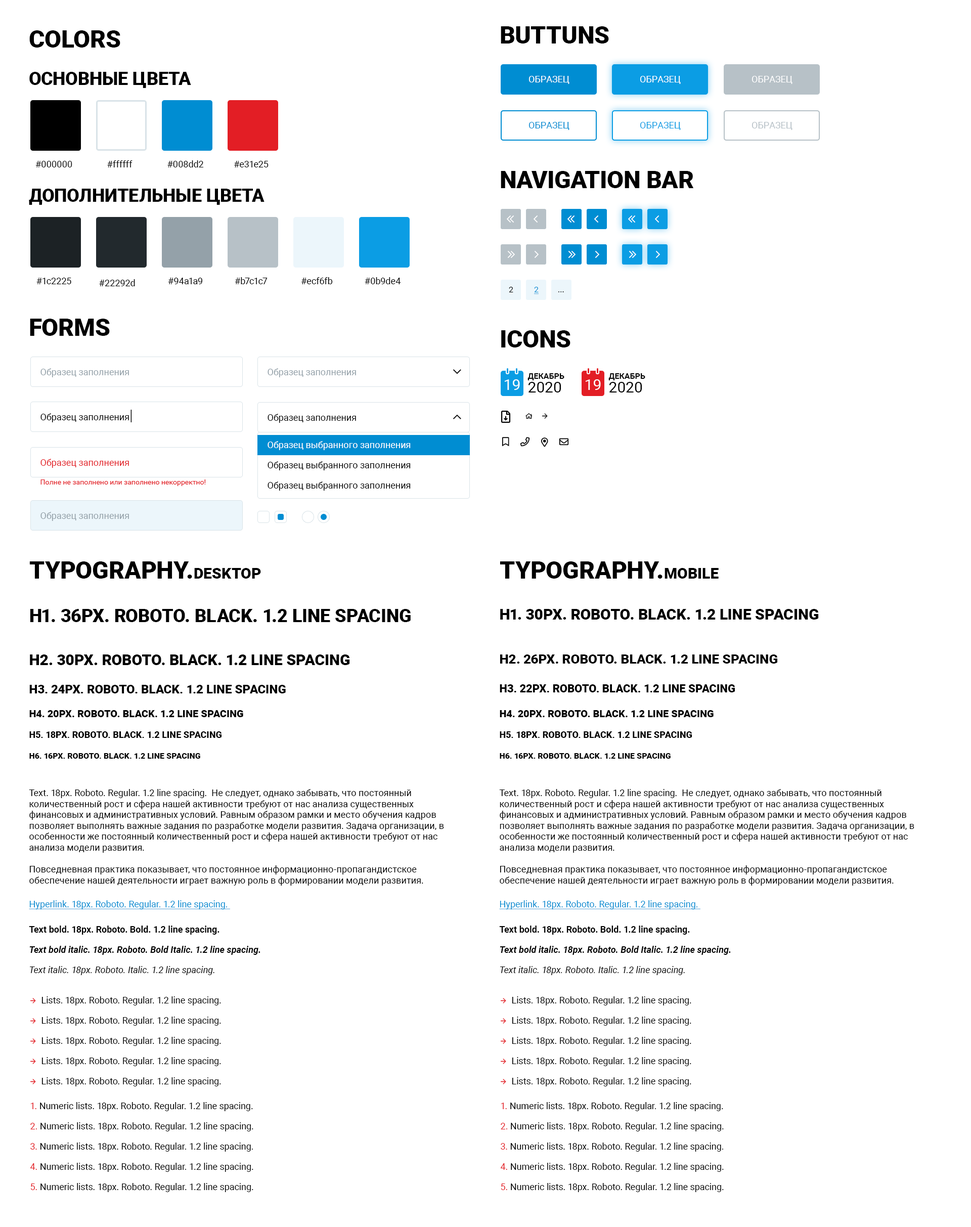
<style>
.page{position:relative;width:971px;height:1227px;background:#ffffff}
.page>*{position:absolute;margin:0}
.t1{font:24.3px "Roboto-Black";color:#000000;text-transform:uppercase}
.t2{font:18.2px "Roboto-Black";color:#000000;text-transform:uppercase}
.t3{font:9.1px "Roboto-Regular";color:#ffffff;text-transform:uppercase}
.t4{font:9.1px "Roboto-Regular";color:#008dd2;text-transform:uppercase}
.t5{font:9.1px "Roboto-Regular";color:#0b9de4;text-transform:uppercase}
.t6{font:9.1px "Roboto-Regular";color:#b7c1c7;text-transform:uppercase}
.t7{font:9.1px "Roboto-Regular";color:#000000}
.t8{font:8.1px "Roboto-Regular";color:#000000;text-transform:uppercase}
.t9{font:8.1px "Roboto-Regular";color:#008dd2;text-transform:uppercase;text-decoration:underline}
.t10{font:9.1px "Roboto-Regular";color:#94a1a9}
.t11{font:8.1px "Roboto-Bold";color:#000000;text-transform:uppercase}
.t12{font:15.2px "Roboto-Regular";color:#ffffff;text-transform:uppercase}
.t13{font:15.2px "Roboto-Regular";color:#000000;text-transform:uppercase}
.t14{font:15.2px "Roboto-Light";color:#000000}
.t15{font:9.1px/20.2px "Roboto-Regular";color:#000000}
.t16{font:9.1px/20.2px "Roboto-Regular";color:#ffffff}
.t17{font:9.1px "Roboto-Regular";color:#e31e25}
.t18{font:7.1px "Roboto-Regular";color:#e31e25}
.t19{font:15.2px "Roboto-Black";color:#000000;text-transform:uppercase}
.t20{font:13.2px "Roboto-Black";color:#000000;text-transform:uppercase}
.t21{font:12.1px "Roboto-Black";color:#000000;text-transform:uppercase}
.t22{font:11.1px "Roboto-Black";color:#000000;text-transform:uppercase}
.t23{font:10.1px "Roboto-Black";color:#000000;text-transform:uppercase}
.t24{font:9.1px "Roboto-Black";color:#000000;text-transform:uppercase}
.t25{font:8.1px "Roboto-Black";color:#000000;text-transform:uppercase}
.t26{font:9.1px "Roboto-Regular";color:#008dd2;text-decoration:underline}
.t27{font:9.1px "Roboto-Bold";color:#000000}
.t28{font:9.1px "Roboto-BoldItalic";color:#000000}
.t29{font:9.1px "Roboto-Italic";color:#000000}
.t30{font:9.1px/20.2px "Roboto-Regular";color:#e31e25}
</style>
<div class="page">
<p class="t1" style="left:501px;top:26px;width:108px;height:18px">buttuns</p>
<p class="t1" style="left:29px;top:30px;width:91px;height:18px">colors</p>
<p class="t2" style="left:29px;top:72px;width:162px;height:16px">Основные цвета</p>
<p class="t3" style="left:529px;top:76px;width:41px;height:8px">образец</p>
<p class="t3" style="left:640px;top:76px;width:41px;height:8px">образец</p>
<p class="t3" style="left:752px;top:76px;width:41px;height:8px">образец</p>
<p class="t4" style="left:529px;top:122px;width:41px;height:8px">образец</p>
<p class="t5" style="left:640px;top:122px;width:41px;height:8px">образец</p>
<p class="t6" style="left:752px;top:122px;width:41px;height:8px">образец</p>
<p class="t7" style="left:35px;top:161px;width:37px;height:6px">#000000</p>
<p class="t7" style="left:107px;top:160px;width:26px;height:7px">#ffffff</p>
<p class="t7" style="left:167px;top:160px;width:37px;height:7px">#008dd2</p>
<p class="t7" style="left:234px;top:161px;width:35px;height:6px">#e31e25</p>
<p class="t1" style="left:501px;top:171px;width:193px;height:17px">navigation bar</p>
<p class="t2" style="left:29px;top:189px;width:236px;height:16px">дополнительные цвета</p>
<p class="t7" style="left:36px;top:278px;width:35px;height:6px">#1c2225</p>
<p class="t7" style="left:99px;top:279px;width:36px;height:7px">#22292d</p>
<p class="t7" style="left:168px;top:278px;width:34px;height:6px">#94a1a9</p>
<p class="t7" style="left:235px;top:277px;width:33px;height:7px">#b7c1c7</p>
<p class="t7" style="left:302px;top:277px;width:31px;height:7px">#ecf6fb</p>
<p class="t7" style="left:365px;top:277px;width:36px;height:7px">#0b9de4</p>
<p class="t8" style="left:509px;top:287px;width:5px;height:5px">2</p>
<p class="t9" style="left:534px;top:287px;width:5px;height:7px">2</p>
<p class="t8" style="left:559px;top:291px;width:5px;height:1px">...</p>
<p class="t1" style="left:30px;top:319px;width:80px;height:17px">forms</p>
<p class="t1" style="left:501px;top:330px;width:70px;height:18px">icons</p>
<p class="t10" style="left:40px;top:368px;width:89px;height:9px">Образец заполнения</p>
<p class="t10" style="left:268px;top:368px;width:88px;height:9px">Образец заполнения</p>
<p class="t11" style="left:528px;top:373px;width:37px;height:7px">декабрь</p>
<p class="t11" style="left:609px;top:373px;width:37px;height:7px">декабрь</p>
<p class="t12" style="left:505px;top:379px;width:15px;height:11px">19</p>
<p class="t13" style="left:528px;top:382px;width:34px;height:11px">2020</p>
<p class="t12" style="left:586px;top:379px;width:15px;height:11px">19</p>
<p class="t13" style="left:609px;top:382px;width:34px;height:11px">2020</p>
<p class="t7" style="left:40px;top:410px;width:92px;height:12px">Образец заполнения<span class="t14">|</span></p>
<p class="t7" style="left:268px;top:414px;width:88px;height:9px">Образец заполнения</p>
<p class="t15" style="left:268px;top:441px;width:143px;height:50px"><span class="t16">Образец выбранного заполнения<br></span>Образец выбранного заполнения<br>Образец выбранного заполнения</p>
<p class="t17" style="left:40px;top:459px;width:89px;height:9px">Образец заполнения</p>
<p class="t18" style="left:40px;top:480px;width:166px;height:6px">Полне не заполнено или заполнено некорректно!</p>
<p class="t10" style="left:40px;top:512px;width:89px;height:9px">Образец заполнения</p>
<p class="t1" style="left:29px;top:562px;width:232px;height:17px">typography.<span class="t19">desktop</span></p>
<p class="t1" style="left:500px;top:562px;width:219px;height:17px">typography.<span class="t19">mobile</span></p>
<p class="t2" style="left:30px;top:609px;width:381px;height:13px">H1. 36px. Roboto. Black. 1.2 line spacing</p>
<p class="t19" style="left:500px;top:609px;width:319px;height:11px">H1. 30px. Roboto. Black. 1.2 line spacing</p>
<p class="t19" style="left:30px;top:655px;width:320px;height:10px">H2. 30px. Roboto. Black. 1.2 line spacing</p>
<p class="t20" style="left:500px;top:655px;width:278px;height:9px">H2. 26px. Roboto. Black. 1.2 line spacing</p>
<p class="t21" style="left:29px;top:685px;width:257px;height:9px">H3. 24px. Roboto. Black. 1.2 line spacing</p>
<p class="t22" style="left:500px;top:685px;width:235px;height:8px">H3. 22px. Roboto. Black. 1.2 line spacing</p>
<p class="t23" style="left:29px;top:710px;width:214px;height:7px">H4. 20px. Roboto. Black. 1.2 line spacing</p>
<p class="t23" style="left:500px;top:710px;width:214px;height:7px">H4. 20px. Roboto. Black. 1.2 line spacing</p>
<p class="t24" style="left:29px;top:732px;width:193px;height:6px">H5. 18px. Roboto. Black. 1.2 line spacing</p>
<p class="t24" style="left:500px;top:732px;width:192px;height:6px">H5. 18px. Roboto. Black. 1.2 line spacing</p>
<p class="t25" style="left:29px;top:753px;width:171px;height:6px">H6. 16px. Roboto. Black. 1.2 line spacing</p>
<p class="t25" style="left:500px;top:753px;width:171px;height:6px">H6. 16px. Roboto. Black. 1.2 line spacing</p>
<p class="t7" style="left:29px;top:789px;width:415px;height:97px">Text. 18px. Roboto. Regular. 1.2 line spacing.  Не следует, однако забывать, что постоянный количественный рост и сфера нашей активности требуют от нас анализа существенных финансовых и административных условий. Равным образом рамки и место обучения кадров позволяет выполнять важные задания по разработке модели развития. Задача организации, в особенности же постоянный количественный рост и сфера нашей активности требуют от нас анализа модели развития.<br><br>Повседневная практика показывает, что постоянное информационно-пропагандистское обеспечение нашей деятельности играет важную роль в формировании модели развития.</p>
<p class="t7" style="left:499px;top:789px;width:416px;height:97px">Text. 18px. Roboto. Regular. 1.2 line spacing.  Не следует, однако забывать, что постоянный количественный рост и сфера нашей активности требуют от нас анализа существенных финансовых и административных условий. Равным образом рамки и место обучения кадров позволяет выполнять важные задания по разработке модели развития. Задача организации, в особенности же постоянный количественный рост и сфера нашей активности требуют от нас анализа модели развития.<br><br>Повседневная практика показывает, что постоянное информационно-пропагандистское обеспечение нашей деятельности играет важную роль в формировании модели развития.</p>
<p class="t26" style="left:29px;top:901px;width:201px;height:9px">Hyperlink. 18px. Roboto. Regular. 1.2 line spacing.</p>
<p class="t26" style="left:499px;top:901px;width:202px;height:9px">Hyperlink. 18px. Roboto. Regular. 1.2 line spacing.</p>
<p class="t27" style="left:29px;top:926px;width:191px;height:9px">Text bold. 18px. Roboto. Bold. 1.2 line spacing.</p>
<p class="t27" style="left:499px;top:926px;width:191px;height:9px">Text bold. 18px. Roboto. Bold. 1.2 line spacing.</p>
<p class="t28" style="left:29px;top:946px;width:232px;height:9px">Text bold italic. 18px. Roboto. Bold Italic. 1.2 line spacing.</p>
<p class="t28" style="left:500px;top:946px;width:231px;height:9px">Text bold italic. 18px. Roboto. Bold Italic. 1.2 line spacing.</p>
<p class="t29" style="left:30px;top:966px;width:185px;height:10px">Text italic. 18px. Roboto. Italic. 1.2 line spacing.</p>
<p class="t29" style="left:500px;top:966px;width:185px;height:10px">Text italic. 18px. Roboto. Italic. 1.2 line spacing.</p>
<p class="t15" style="left:41px;top:997px;width:180px;height:90px">Lists. 18px. Roboto. Regular. 1.2 line spacing.  <br>Lists. 18px. Roboto. Regular. 1.2 line spacing.  <br>Lists. 18px. Roboto. Regular. 1.2 line spacing.  <br>Lists. 18px. Roboto. Regular. 1.2 line spacing.  <br>Lists. 18px. Roboto. Regular. 1.2 line spacing.</p>
<p class="t15" style="left:512px;top:997px;width:180px;height:90px">Lists. 18px. Roboto. Regular. 1.2 line spacing.  <br>Lists. 18px. Roboto. Regular. 1.2 line spacing.  <br>Lists. 18px. Roboto. Regular. 1.2 line spacing.  <br>Lists. 18px. Roboto. Regular. 1.2 line spacing.  <br>Lists. 18px. Roboto. Regular. 1.2 line spacing.</p>
<p class="t15" style="left:30px;top:1102px;width:223px;height:91px"><span class="t30">1. </span>Numeric lists. 18px. Roboto. Regular. 1.2 line spacing.  <br><span class="t30">2. </span>Numeric lists. 18px. Roboto. Regular. 1.2 line spacing.  <br><span class="t30">3. </span>Numeric lists. 18px. Roboto. Regular. 1.2 line spacing.  <br><span class="t30">4. </span>Numeric lists. 18px. Roboto. Regular. 1.2 line spacing.  <br><span class="t30">5. </span>Numeric lists. 18px. Roboto. Regular. 1.2 line spacing.</p>
<p class="t15" style="left:500px;top:1102px;width:224px;height:91px"><span class="t30">1. </span>Numeric lists. 18px. Roboto. Regular. 1.2 line spacing.  <br><span class="t30">2. </span>Numeric lists. 18px. Roboto. Regular. 1.2 line spacing.  <br><span class="t30">3. </span>Numeric lists. 18px. Roboto. Regular. 1.2 line spacing.  <br><span class="t30">4. </span>Numeric lists. 18px. Roboto. Regular. 1.2 line spacing.  <br><span class="t30">5. </span>Numeric lists. 18px. Roboto. Regular. 1.2 line spacing.</p>
</div>
